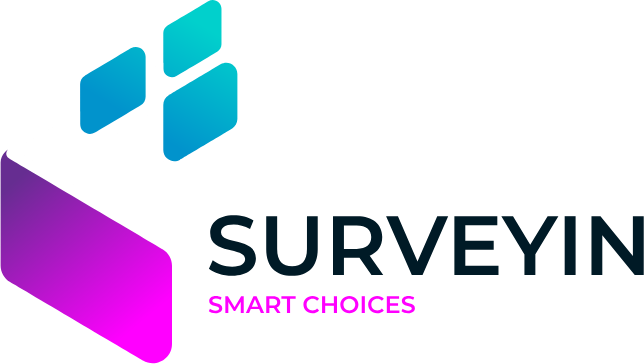
<style>
.page{position:relative;width:644px;height:364px;background:#ffffff}
.page>*{position:absolute;margin:0}
.t1{font:84px "Montserrat-SemiBold";color:#001a26}
.t2{font:24px "Montserrat-SemiBold";color:#ff00ff}
</style>
<div class="page">
<p class="t1" style="left:208px;top:215px;width:436px;height:61px">SURVEYIN</p>
<p class="t2" style="left:208px;top:295px;width:207px;height:19px">SMART CHOICES</p>
</div>
